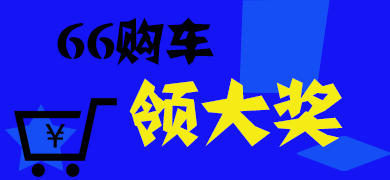
<style>
.page{position:relative;width:390px;height:180px;background:#1414f4}
.page>*{position:absolute;margin:0}
.t1{font:50px/60px "FZJZJW--GB1-0";color:#010101}
.t2{font:72px/60px "FZJZJW--GB1-0";color:#f4ec14}
</style>
<div class="page">
<p class="t1" style="left:57px;top:17px;width:286px;height:130px">66购车<br><span class="t2">    领大奖</span></p>
</div>
